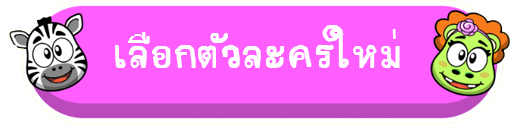
<style>
.page{position:relative;width:519px;height:124px;background:#ff5eff}
.page>*{position:absolute;margin:0}
.t1{font:60px "teddy";color:#ffffff}
</style>
<div class="page">
<p class="t1" style="left:115px;top:25px;width:285px;height:43px">เลือกตัวละครใหม่</p>
</div>
